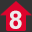
<style>
.page{position:relative;width:32px;height:32px;background:#333333}
.page>*{position:absolute;margin:0}
.t1{font:25px "Arial-BoldMT";color:#ececec}
</style>
<div class="page">
<p class="t1" style="left:9px;top:10px;width:13px;height:19px">8</p>
</div>
